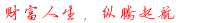
<style>
.page{position:relative;width:218px;height:23px;background:#ffffff}
.page>*{position:absolute;margin:0}
.t1{font:16.8px "FZYBXSJW--GB1-0";letter-spacing:0.15em;color:#ff0000}
</style>
<div class="page">
<p class="t1" style="left:5px;top:5px;width:170px;height:16px">财富人生，纵腾起航</p>
</div>
